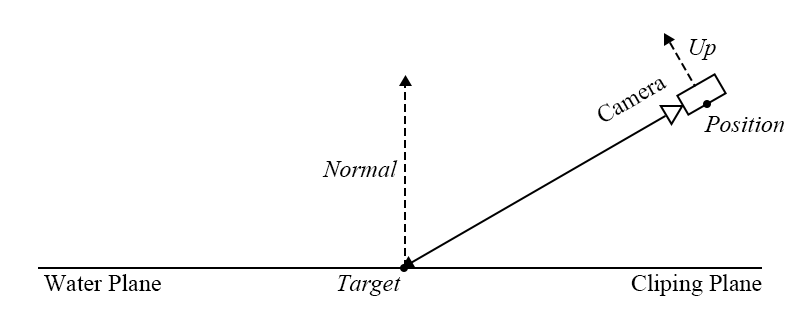
<style>
.page{position:relative;width:800px;height:333px;background:#ffffff}
.page>*{position:absolute;margin:0}
.t1{font:24px "TimesNewRomanPS-ItalicMT";color:#000000}
.t2{font:24px "TimesNewRomanPSMT";color:#000000}
</style>
<div class="page">
<p class="t1" style="left:689px;top:39px;width:27px;height:21px">Up</p>
<p class="t2" style="left:598px;top:79px;width:69px;height:43px;rotate:-30deg">Camera</p>
<p class="t1" style="left:704px;top:116px;width:80px;height:16px">Position</p>
<p class="t1" style="left:322px;top:160px;width:76px;height:17px">Normal</p>
<p class="t2" style="left:43px;top:274px;width:118px;height:17px">Water Plane</p>
<p class="t1" style="left:337px;top:275px;width:64px;height:21px">Target</p>
<p class="t2" style="left:631px;top:274px;width:131px;height:22px">Cliping Plane</p>
</div>
